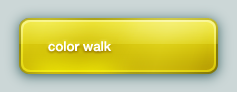
<style>
.page{position:relative;width:237px;height:92px}
.page>*{position:absolute;margin:0}
.t1{font:13.3px "Helvetica65-Medium";color:#ffffff}
</style>
<div class="page">
<p class="t1" style="left:48px;top:41px;width:64px;height:11px">color walk</p>
</div>
